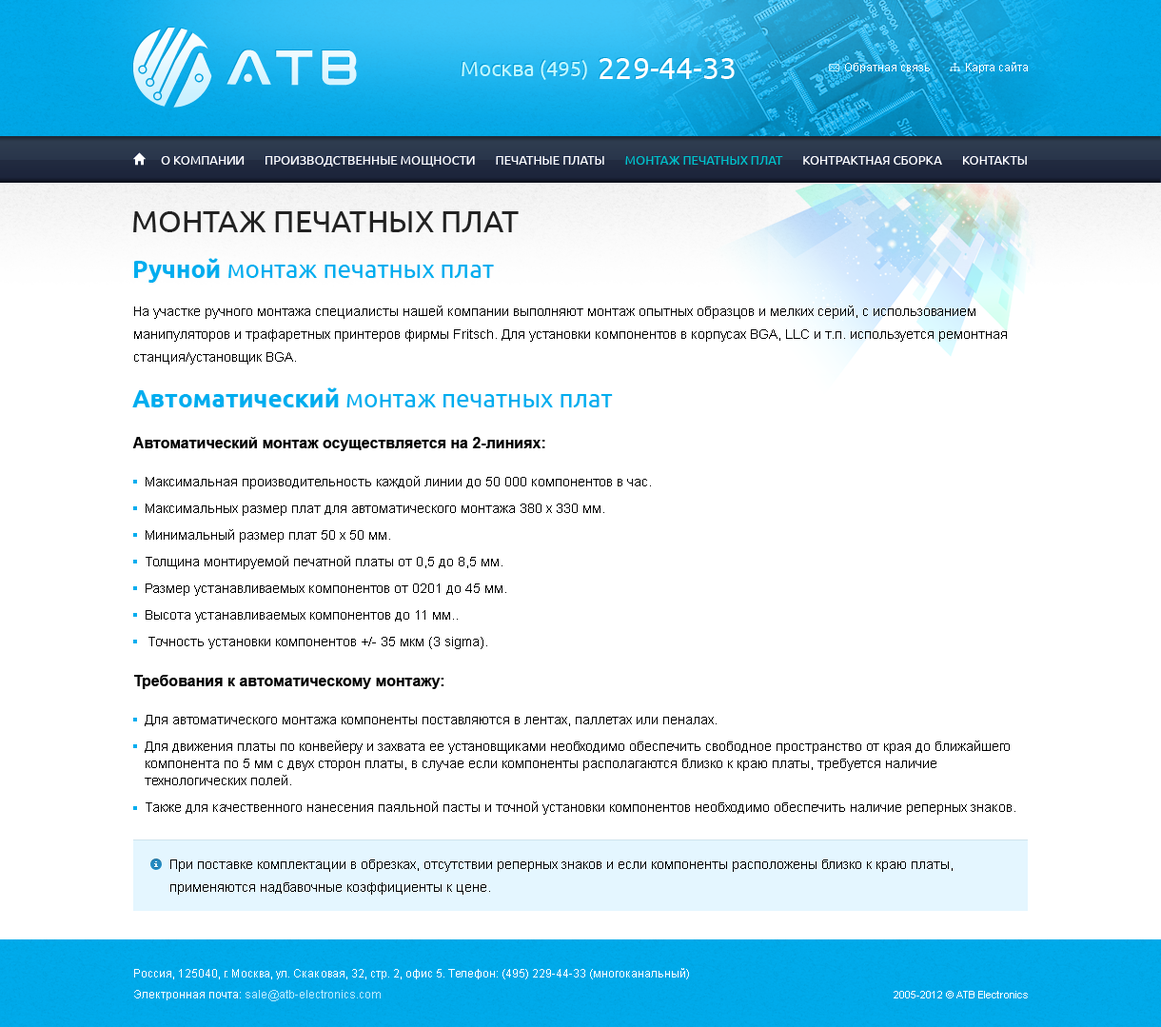
<style>
.page{position:relative;width:1161px;height:1027px;background:#ffffff}
.page>*{position:absolute;margin:0}
.t1{font:20.9px "Ubuntu";color:#c0f7ff}
.t2{font:30.5px "Ubuntu";color:#ffffff}
.t3{font:11.4px "ArialMT";color:#ffffff}
.t4{font:12.4px "Ubuntu";color:#ffffff;text-transform:uppercase}
.t5{font:12.4px "Ubuntu";color:#00c1c8;text-transform:uppercase}
.t6{font:30.5px "Ubuntu";color:#222222;text-transform:uppercase}
.t7{font:24.7px "Ubuntu";color:#00adef}
.t8{font:24.7px "Ubuntu-Bold";color:#00adef}
.t9{font:13.3px/22.8px "ArialMT";color:#000000}
.t10{font:15.2px "Arial-BoldMT";color:#000000}
.t11{font:13.3px/26.6px "ArialMT";color:#000000}
.t12{font:13.3px/31.4px "ArialMT";color:#000000}
.t13{font:13.3px/17.1px "ArialMT";color:#000000}
.t14{font:11.4px/20.9px "ArialMT";color:#ffffff}
.t15{font:11.4px/20.9px "ArialMT";color:#b9ecff}
.t16{font:10.5px "ArialMT";color:#ffffff}
</style>
<div class="page">
<p class="t1" style="left:462px;top:58px;width:273px;height:22px">Москва (495)  <span class="t2">229-44-33</span></p>
<p class="t3" style="left:845px;top:62px;width:183px;height:11px">Обратная связь            Карта сайта</p>
<p class="t4" style="left:161px;top:156px;width:866px;height:11px">О Компании       Производственные мощности       Печатные платы       <span class="t5">Монтаж печатных плат</span>       Контрактная сборка       Контакты</p>
<p class="t6" style="left:133px;top:211px;width:386px;height:21px">Монтаж печатных плат</p>
<p class="t7" style="left:134px;top:258px;width:360px;height:25px"><span class="t8">Ручной </span>монтаж печатных плат</p>
<p class="t9" style="left:134px;top:306px;width:873px;height:59px">На участке ручного монтажа специалисты нашей компании выполняют монтаж опытных образцов и мелких серий, c использованием манипуляторов и трафаретных принтеров фирмы Fritsch. Для установки компонентов в корпусах BGA, LLC и т.п. используется ремонтная станция/установщик BGA.</p>
<p class="t7" style="left:132px;top:387px;width:481px;height:20px"><span class="t8">Автоматический </span>монтаж печатных плат</p>
<p class="t10" style="left:132px;top:437px;width:413px;height:14px">Автоматический монтаж осуществляется на 2-линиях:</p>
<p class="t11" style="left:146px;top:476px;width:505px;height:173px"><span class="t12">Максимальная производительность каждой линии до 50 000 компонентов в час.<br></span>Максимальных размер плат для автоматического монтажа 380 х 330 мм.<br>Минимальный размер плат 50 х 50 мм.<br>Толщина монтируемой печатной платы от 0,5 до 8,5 мм.<br>Размер устанавливаемых компонентов от 0201 до 45 мм.<br>Высота устанавливаемых компонентов до 11 мм..<br>Точность установки компонентов +/- 35 мкм (3 sigma).</p>
<p class="t10" style="left:134px;top:675px;width:310px;height:14px">Требования к автоматическому монтажу:</p>
<p class="t13" style="left:145px;top:715px;width:871px;height:100px">Для автоматического монтажа компоненты поставляются в лентах, паллетах или пеналах.<br>   <br>Для движения платы по конвейеру и захвата ее установщиками необходимо обеспечить свободное пространство от края до ближайшего компонента по 5 мм с двух сторон платы, в случае если компоненты располагаются близко к краю платы, требуется наличие технологических полей.<br>   <br>Также для качественного нанесения паяльной пасты и точной установки компонентов необходимо обеспечить наличие реперных знаков.</p>
<p class="t9" style="left:170px;top:859px;width:783px;height:36px">При поставке комплектации в обрезках, отсутствии реперных знаков и если компоненты расположены близко к краю платы, применяются надбавочные коэффициенты к цене.</p>
<p class="t14" style="left:134px;top:968px;width:555px;height:33px">Россия, 125040, г. Москва, ул. Скаковая, 32, стр. 2, офис 5. Телефон: (495) 229-44-33 (многоканальный)<br>Электронная почта: <span class="t15">sale@atb-electronics.com</span></p>
<p class="t16" style="left:894px;top:991px;width:134px;height:7px">2005-2012 © ATB Electronics</p>
</div>
